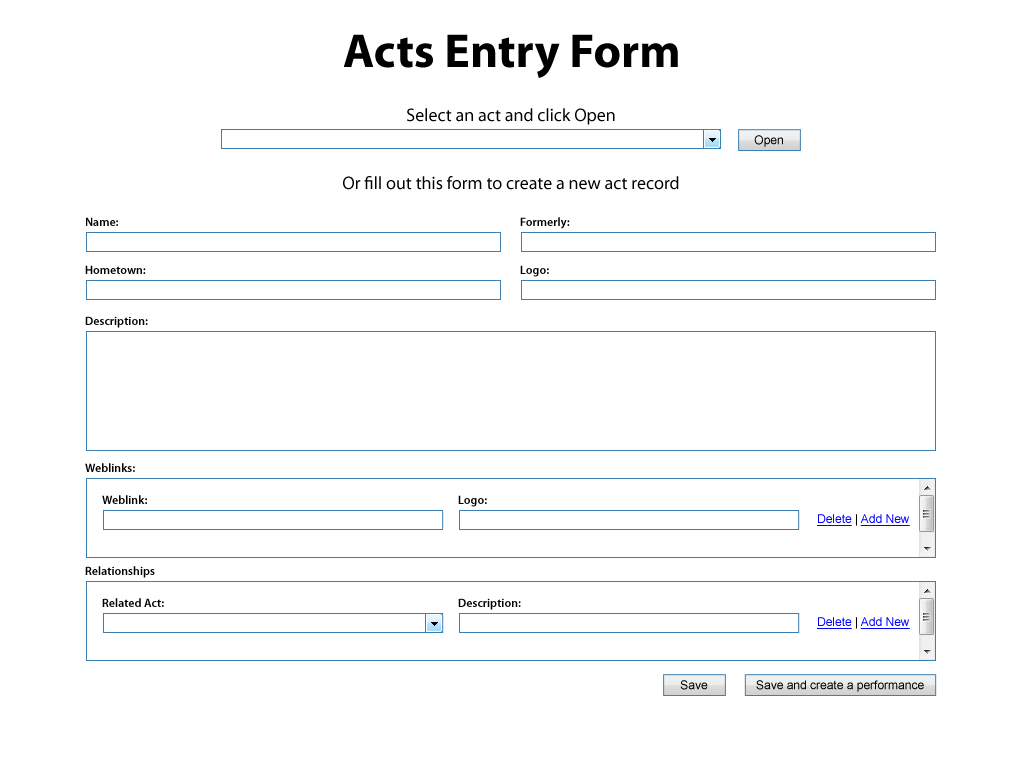
<style>
.page{position:relative;width:1024px;height:768px;background:#ffffff}
.page>*{position:absolute;margin:0}
.t1{font:48px "MyriadPro-Bold";color:#000000}
.t2{font:18px "MyriadPro-Regular";color:#000000}
.t3{font:12px "ArialMT";color:#000000}
.t4{font:12px "MyriadPro-Semibold";color:#000000}
.t5{font:12px "ArialMT";color:#0000ff;text-decoration:underline}
</style>
<div class="page">
<p class="t1" style="left:343px;top:34px;width:335px;height:44px">Acts Entry Form</p>
<p class="t2" style="left:407px;top:108px;width:208px;height:17px">Select an act and click Open</p>
<p class="t3" style="left:754px;top:135px;width:29px;height:12px">Open</p>
<p class="t2" style="left:343px;top:176px;width:336px;height:14px">Or fill out this form to create a new act record</p>
<p class="t4" style="left:86px;top:217px;width:32px;height:9px">Name:</p>
<p class="t4" style="left:520px;top:217px;width:50px;height:12px">Formerly:</p>
<p class="t4" style="left:85px;top:265px;width:61px;height:9px">Hometown:</p>
<p class="t4" style="left:520px;top:265px;width:29px;height:12px">Logo:</p>
<p class="t4" style="left:85px;top:316px;width:63px;height:12px">Description:</p>
<p class="t4" style="left:85px;top:463px;width:50px;height:9px">Weblinks:</p>
<p class="t4" style="left:102px;top:495px;width:45px;height:9px">Weblink:</p>
<p class="t4" style="left:458px;top:495px;width:29px;height:12px">Logo:</p>
<p class="t5" style="left:817px;top:514px;width:93px;height:12px">Delete<span class="t3"> | </span>Add New</p>
<p class="t4" style="left:85px;top:566px;width:70px;height:12px">Relationships</p>
<p class="t4" style="left:102px;top:598px;width:62px;height:9px">Related Act:</p>
<p class="t4" style="left:458px;top:598px;width:63px;height:12px">Description:</p>
<p class="t5" style="left:817px;top:617px;width:93px;height:12px">Delete<span class="t3"> | </span>Add New</p>
<p class="t3" style="left:680px;top:680px;width:28px;height:10px">Save</p>
<p class="t3" style="left:756px;top:680px;width:168px;height:12px">Save and create a performance</p>
</div>
